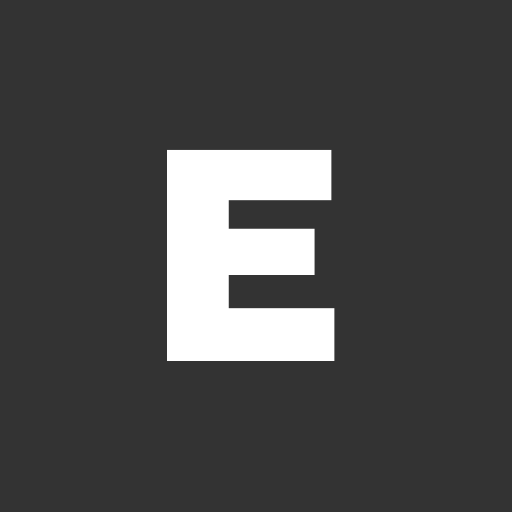
<style>
.page{position:relative;width:512px;height:512px;background:#333333}
.page>*{position:absolute;margin:0}
.t1{font:295px "NHaasGroteskDSPro-95Blk";color:#ffffff}
</style>
<div class="page">
<p class="t1" style="left:167px;top:149px;width:168px;height:212px">E</p>
</div>
